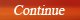
<style>
.page{position:relative;width:80px;height:20px}
.page>*{position:absolute;margin:0}
.t1{font:14px "TimesNewRomanPSMT";color:#ffffff;font-style:italic}
</style>
<div class="page">
<p class="t1" style="left:14px;top:5px;width:51px;height:10px">Continue</p>
</div>
